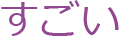
<style>
.page{position:relative;width:120px;height:40px;background:#ffffff}
.page>*{position:absolute;margin:0}
.t1{font:41px "Meiryo-Italic";color:#924792}
</style>
<div class="page">
<p class="t1" style="left:1px;top:0px;width:118px;height:36px">すごい</p>
</div>
